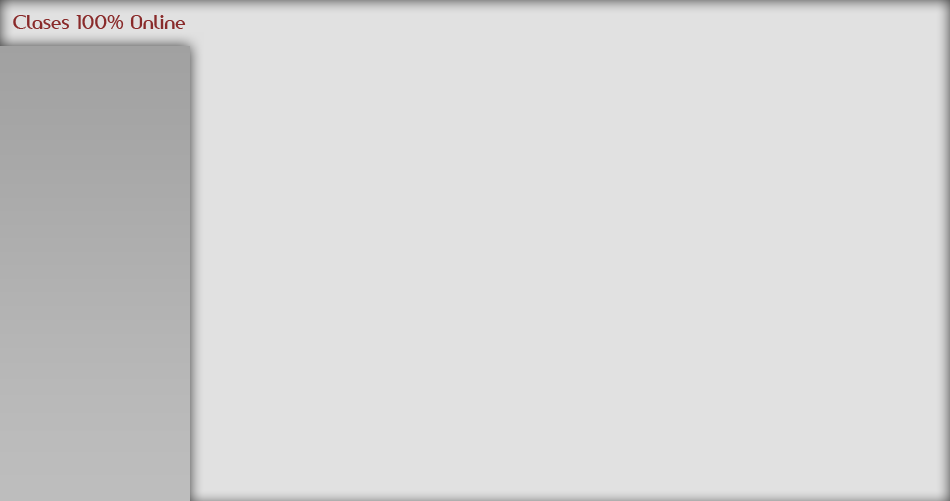
<style>
.page{position:relative;width:950px;height:501px;background:#e1e1e1}
.page>*{position:absolute;margin:0}
.t1{font:18.8px "AmerikaSans";color:#8a2a2a}
</style>
<div class="page">
<p class="t1" style="left:13px;top:15px;width:173px;height:14px">Clases 100% Online</p>
</div>
